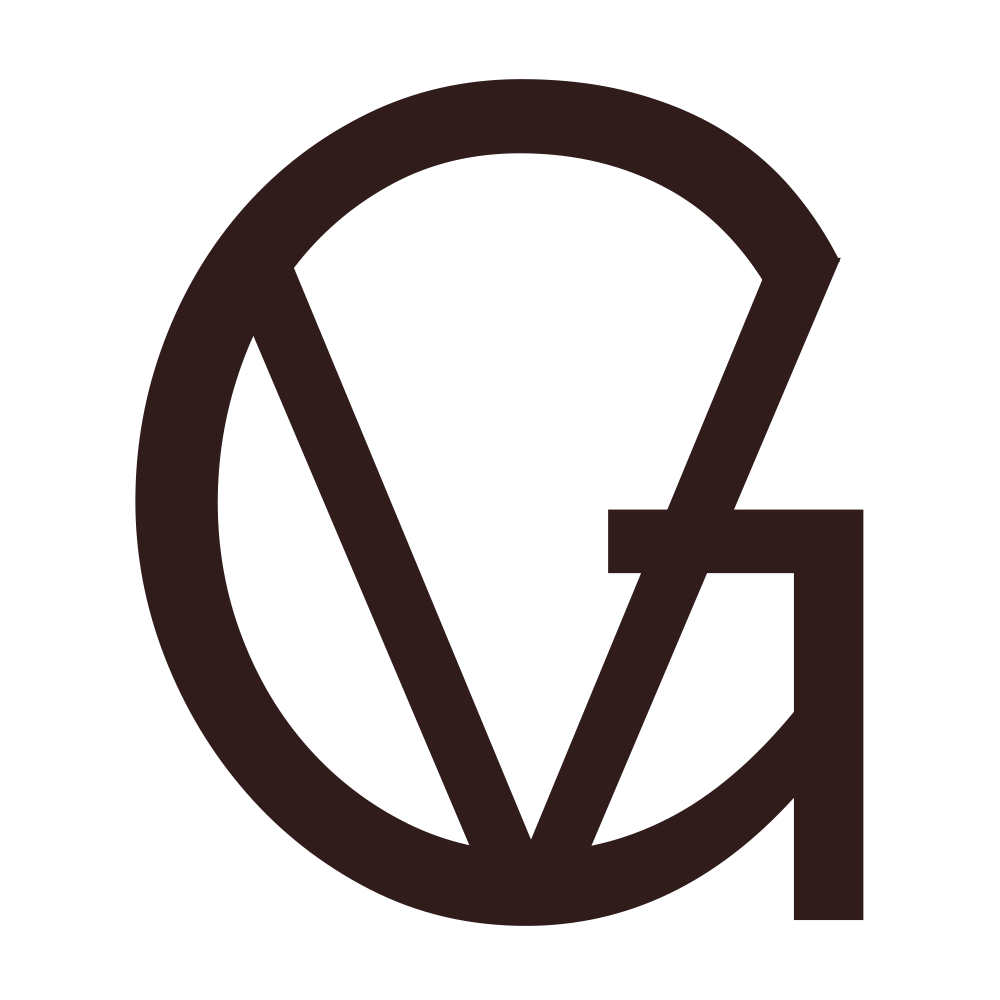
<style>
.page{position:relative;width:1000px;height:1000px;background:#ffffff}
.page>*{position:absolute;margin:0}
.t1{font:1176.5px "Raleway-Regular";color:#311c1c}
.t2{font:934.3px "Raleway-Regular";color:#311c1c}
</style>
<div class="page">
<p class="t1" style="left:135px;top:79px;width:729px;height:847px">G</p>
<p class="t2" style="left:220px;top:257px;width:621px;height:664px">V</p>
</div>
